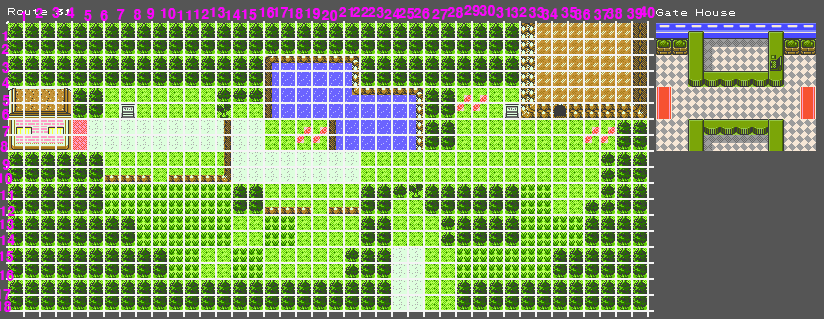
<style>
.page{position:relative;width:824px;height:319px;background:#555555}
.page>*{position:absolute;margin:0}
.t1{font:13.3px "H2gtrE";color:#fc00ff}
</style>
<div class="page">
<p class="t1" style="left:464px;top:5px;width:16px;height:11px">29</p>
<p class="t1" style="left:479px;top:5px;width:16px;height:11px">30</p>
<p class="t1" style="left:639px;top:6px;width:16px;height:12px">40</p>
<p class="t1" style="left:20px;top:11px;width:6px;height:10px">1</p>
<p class="t1" style="left:35px;top:8px;width:8px;height:10px">2</p>
<p class="t1" style="left:52px;top:7px;width:8px;height:11px">3</p>
<p class="t1" style="left:67px;top:7px;width:8px;height:11px">4</p>
<p class="t1" style="left:84px;top:10px;width:8px;height:11px">5</p>
<p class="t1" style="left:100px;top:10px;width:8px;height:11px">6</p>
<p class="t1" style="left:117px;top:9px;width:8px;height:11px">7</p>
<p class="t1" style="left:133px;top:9px;width:8px;height:11px">8</p>
<p class="t1" style="left:147px;top:8px;width:8px;height:11px">9</p>
<p class="t1" style="left:160px;top:8px;width:16px;height:11px">10</p>
<p class="t1" style="left:177px;top:10px;width:14px;height:10px">11</p>
<p class="t1" style="left:193px;top:9px;width:16px;height:10px">12</p>
<p class="t1" style="left:210px;top:7px;width:15px;height:11px">13</p>
<p class="t1" style="left:225px;top:9px;width:16px;height:11px">14</p>
<p class="t1" style="left:241px;top:9px;width:16px;height:11px">15</p>
<p class="t1" style="left:259px;top:7px;width:16px;height:11px">16</p>
<p class="t1" style="left:273px;top:7px;width:15px;height:11px">17</p>
<p class="t1" style="left:288px;top:8px;width:15px;height:11px">18</p>
<p class="t1" style="left:305px;top:8px;width:15px;height:11px">19</p>
<p class="t1" style="left:322px;top:10px;width:16px;height:11px">20</p>
<p class="t1" style="left:339px;top:7px;width:14px;height:10px">21</p>
<p class="t1" style="left:353px;top:7px;width:16px;height:10px">22</p>
<p class="t1" style="left:368px;top:7px;width:16px;height:11px">23</p>
<p class="t1" style="left:384px;top:8px;width:16px;height:11px">24</p>
<p class="t1" style="left:398px;top:8px;width:17px;height:11px">25</p>
<p class="t1" style="left:414px;top:8px;width:16px;height:11px">26</p>
<p class="t1" style="left:432px;top:9px;width:16px;height:11px">27</p>
<p class="t1" style="left:447px;top:7px;width:16px;height:11px">28</p>
<p class="t1" style="left:496px;top:7px;width:14px;height:11px">31</p>
<p class="t1" style="left:511px;top:7px;width:16px;height:11px">32</p>
<p class="t1" style="left:529px;top:7px;width:16px;height:11px">33</p>
<p class="t1" style="left:542px;top:8px;width:16px;height:12px">34</p>
<p class="t1" style="left:561px;top:7px;width:16px;height:11px">35</p>
<p class="t1" style="left:574px;top:9px;width:17px;height:11px">36</p>
<p class="t1" style="left:594px;top:9px;width:16px;height:11px">37</p>
<p class="t1" style="left:606px;top:8px;width:17px;height:11px">38</p>
<p class="t1" style="left:627px;top:8px;width:16px;height:11px">39</p>
<p class="t1" style="left:2px;top:31px;width:5px;height:10px">1</p>
<p class="t1" style="left:1px;top:44px;width:8px;height:10px">2</p>
<p class="t1" style="left:2px;top:62px;width:8px;height:11px">3</p>
<p class="t1" style="left:2px;top:77px;width:8px;height:11px">4</p>
<p class="t1" style="left:2px;top:95px;width:8px;height:11px">5</p>
<p class="t1" style="left:2px;top:109px;width:8px;height:11px">6</p>
<p class="t1" style="left:2px;top:126px;width:8px;height:11px">7</p>
<p class="t1" style="left:0px;top:141px;width:8px;height:11px">8</p>
<p class="t1" style="left:2px;top:159px;width:8px;height:11px">9</p>
<p class="t1" style="left:0px;top:190px;width:13px;height:10px">11</p>
<p class="t1" style="left:0px;top:206px;width:15px;height:10px">12</p>
<p class="t1" style="left:0px;top:219px;width:14px;height:11px">13</p>
<p class="t1" style="left:0px;top:234px;width:15px;height:11px">14</p>
<p class="t1" style="left:0px;top:251px;width:14px;height:11px">15</p>
<p class="t1" style="left:0px;top:270px;width:14px;height:11px">16</p>
</div>
